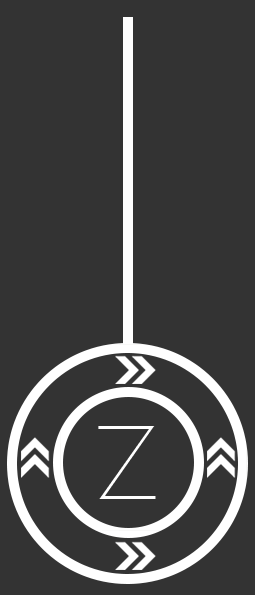
<style>
.page{position:relative;width:255px;height:595px;background:#333333}
.page>*{position:absolute;margin:0}
.t1{font:91px "Adequate-ExtraLight";color:#ffffff}
</style>
<div class="page">
<p class="t1" style="left:98px;top:426px;width:58px;height:73px">Z</p>
</div>
